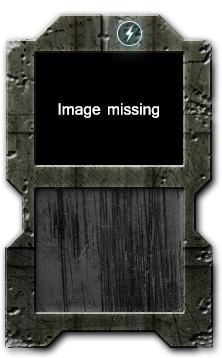
<style>
.page{position:relative;width:222px;height:358px}
.page>*{position:absolute;margin:0}
.t1{font:20px "Tunga";color:#ffffff}
</style>
<div class="page">
<p class="t1" style="left:58px;top:103px;width:101px;height:15px">Image missing</p>
</div>
